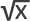
<style>
.page{position:relative;width:30px;height:21px;background:#ffffff}
.page>*{position:absolute;margin:0}
.t1{font:32px "Calibri";color:#3c3c3c}
.t2{font:30px "Calibri";color:#3c3c3c}
</style>
<div class="page">
<p class="t1" style="left:0px;top:0px;width:16px;height:21px">√</p>
<p class="t1" style="left:13px;top:0px;width:17px;height:3px">–</p>
<p class="t2" style="left:15px;top:5px;width:12px;height:14px">x</p>
</div>
